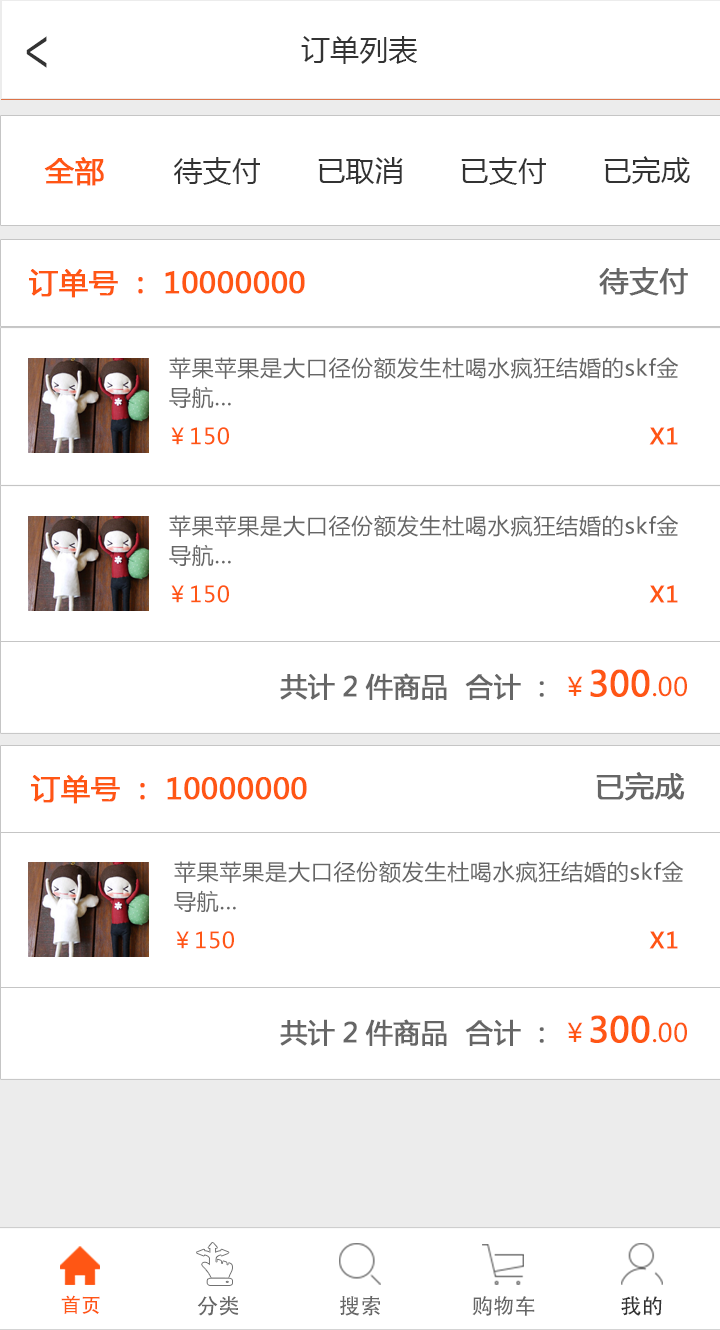
<style>
.page{position:relative;width:720px;height:1330px;background:#ffffff}
.page>*{position:absolute;margin:0}
.t1{font:51.9px "AdobeHeitiStd-Regular";color:#333333;scale:0.72 1}
.t2{font:29.2px "MicrosoftYaHei";color:#333333}
.t3{font:29.2px "MicrosoftYaHei";color:#ff5614;font-weight:bold}
.t4{font:29.2px "MicrosoftYaHei";color:#666666;font-weight:bold}
.t5{font:22px/29.5px "MicrosoftYaHei";letter-spacing:0.035em;color:#666666}
.t6{font:22px "MicrosoftYaHei";letter-spacing:0.035em;color:#ff5614}
.t7{font:22px "MicrosoftYaHei";letter-spacing:0.035em;color:#ff5614;font-weight:bold}
.t8{font:26.7px "MicrosoftYaHei";color:#666666;font-weight:bold}
.t9{font:25.6px "MicrosoftYaHei";color:#ff5614}
.t10{font:34.1px "MicrosoftYaHei";color:#ff5614;font-weight:bold}
.t11{font:20px "AdobeHeitiStd-Regular";color:#ff5614}
.t12{font:21.4px "AdobeHeitiStd-Regular";color:#666666}
.t13{font:21.4px "AdobeHeitiStd-Regular";color:#333333}
</style>
<div class="page">
<p class="t1" style="left:26px;top:36px;width:21px;height:32px;rotate:180deg">&gt;</p>
<p class="t2" style="left:301px;top:36px;width:117px;height:28px">订单列表</p>
<p class="t3" style="left:44px;top:157px;width:60px;height:29px">全部</p>
<p class="t2" style="left:174px;top:157px;width:86px;height:28px">待支付</p>
<p class="t2" style="left:318px;top:157px;width:85px;height:27px">已取消</p>
<p class="t2" style="left:461px;top:157px;width:85px;height:28px">已支付</p>
<p class="t2" style="left:604px;top:156px;width:86px;height:28px">已完成</p>
<p class="t3" style="left:29px;top:269px;width:276px;height:29px">订单号：10000000</p>
<p class="t4" style="left:599px;top:267px;width:89px;height:29px">待支付</p>
<p class="t5" style="left:169px;top:357px;width:510px;height:52px">苹果苹果是大口径份额发生杜喝水疯狂结婚的skf金导航...</p>
<p class="t6" style="left:171px;top:427px;width:58px;height:18px">￥150</p>
<p class="t7" style="left:649px;top:427px;width:29px;height:18px">X1</p>
<p class="t5" style="left:169px;top:515px;width:510px;height:52px">苹果苹果是大口径份额发生杜喝水疯狂结婚的skf金导航...</p>
<p class="t6" style="left:171px;top:585px;width:58px;height:18px">￥150</p>
<p class="t7" style="left:649px;top:585px;width:29px;height:18px">X1</p>
<p class="t8" style="left:280px;top:669px;width:407px;height:31px">共计2件商品  合计：<span class="t9">￥</span><span class="t10">300</span><span class="t9">.00</span></p>
<p class="t4" style="left:596px;top:772px;width:89px;height:29px">已完成</p>
<p class="t3" style="left:31px;top:775px;width:276px;height:29px">订单号：10000000</p>
<p class="t5" style="left:174px;top:861px;width:510px;height:52px">苹果苹果是大口径份额发生杜喝水疯狂结婚的skf金导航...</p>
<p class="t6" style="left:176px;top:931px;width:58px;height:18px">￥150</p>
<p class="t7" style="left:649px;top:931px;width:29px;height:18px">X1</p>
<p class="t8" style="left:280px;top:1015px;width:407px;height:31px">共计2件商品  合计：<span class="t9">￥</span><span class="t10">300</span><span class="t9">.00</span></p>
<p class="t11" style="left:61px;top:1295px;width:39px;height:19px">首页</p>
<p class="t12" style="left:197px;top:1296px;width:42px;height:20px">分类</p>
<p class="t12" style="left:340px;top:1295px;width:40px;height:21px">搜索</p>
<p class="t12" style="left:472px;top:1296px;width:63px;height:20px">购物车</p>
<p class="t13" style="left:621px;top:1296px;width:41px;height:20px">我的</p>
</div>
